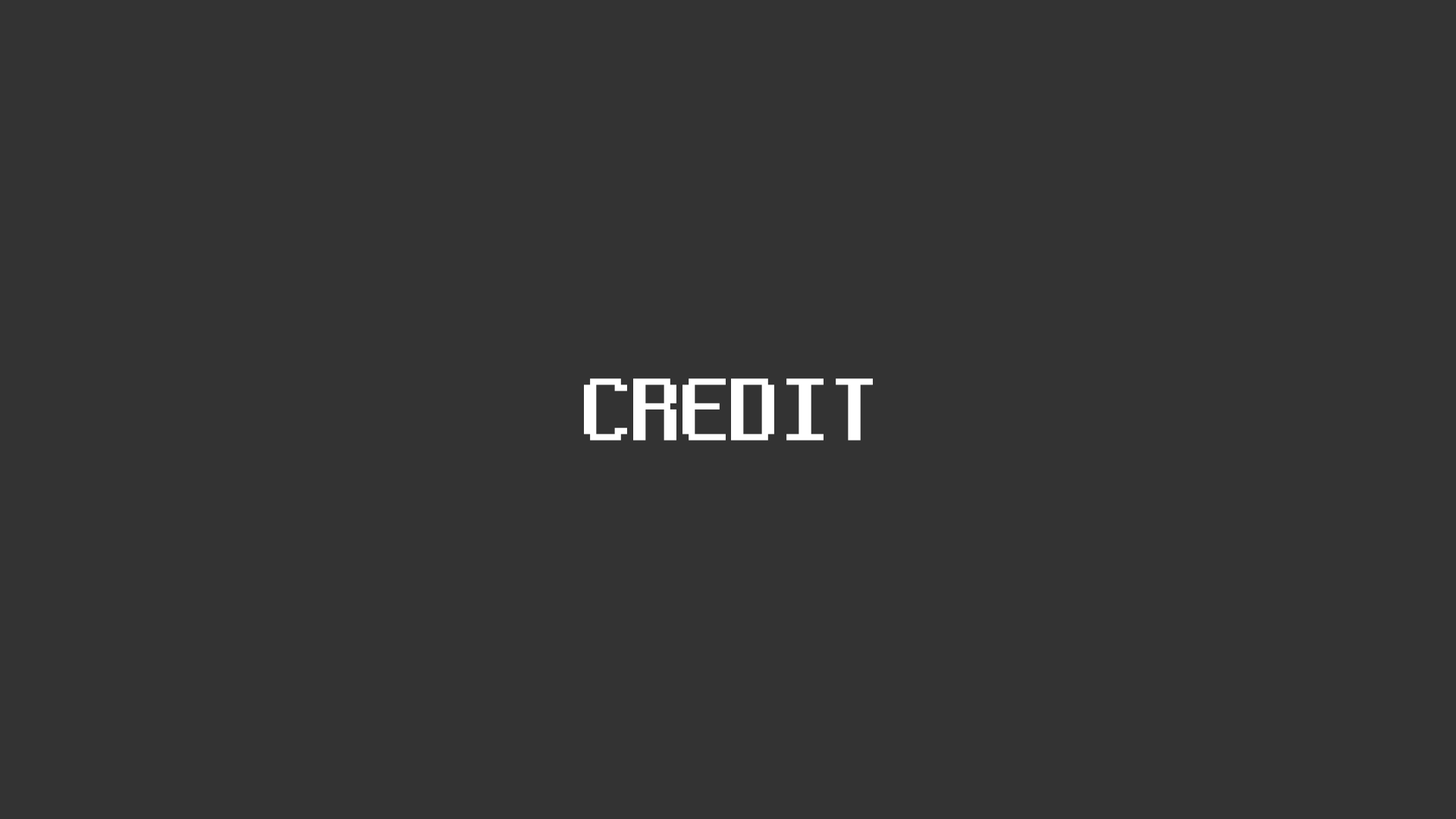
<style>
.page{position:relative;width:1456px;height:819px;background:#333333}
.page>*{position:absolute;margin:0}
.t1{font:98.2px "NeoDunggeunmo-Regular";color:#ffffff}
</style>
<div class="page">
<p class="t1" style="left:584px;top:378px;width:289px;height:63px">CREDIT</p>
</div>
